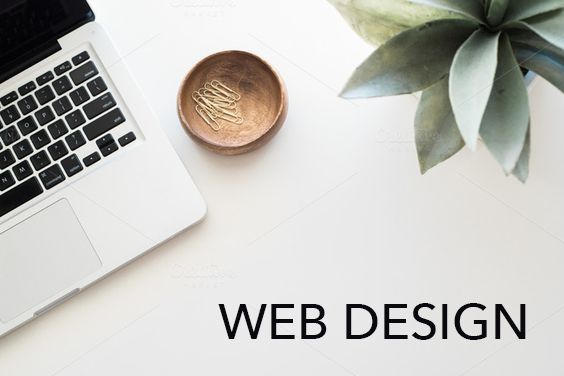
<style>
.page{position:relative;width:564px;height:376px}
.page>*{position:absolute;margin:0}
.t1{font:50px "AvenirNext-Medium";color:#0a090d;text-transform:uppercase}
</style>
<div class="page">
<p class="t1" style="left:218px;top:303px;width:308px;height:37px">web design</p>
</div>
